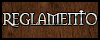
<style>
.page{position:relative;width:100px;height:40px}
.page>*{position:absolute;margin:0}
.t1{font:18.3px "Mason-Regular";letter-spacing:-0.1em;scale:0.84 1}
</style>
<div class="page">
<p class="t1" style="left:3px;top:10px;width:95px;height:17px">REGLAMENTO</p>
</div>
